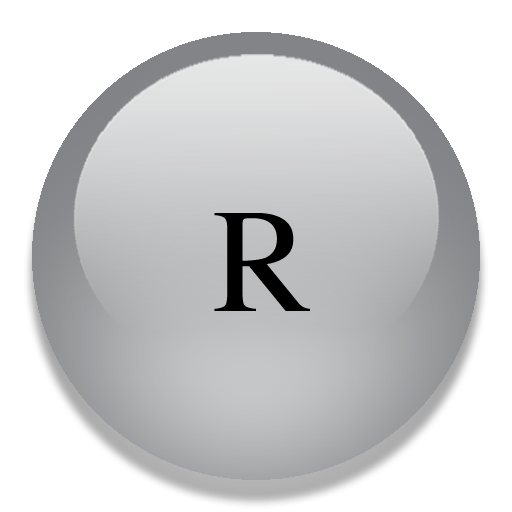
<style>
.page{position:relative;width:512px;height:512px;background:#ffffff}
.page>*{position:absolute;margin:0}
.t1{font:148px "Times-Roman";color:#000000}
</style>
<div class="page">
<p class="t1" style="left:214px;top:213px;width:96px;height:98px">R</p>
</div>
